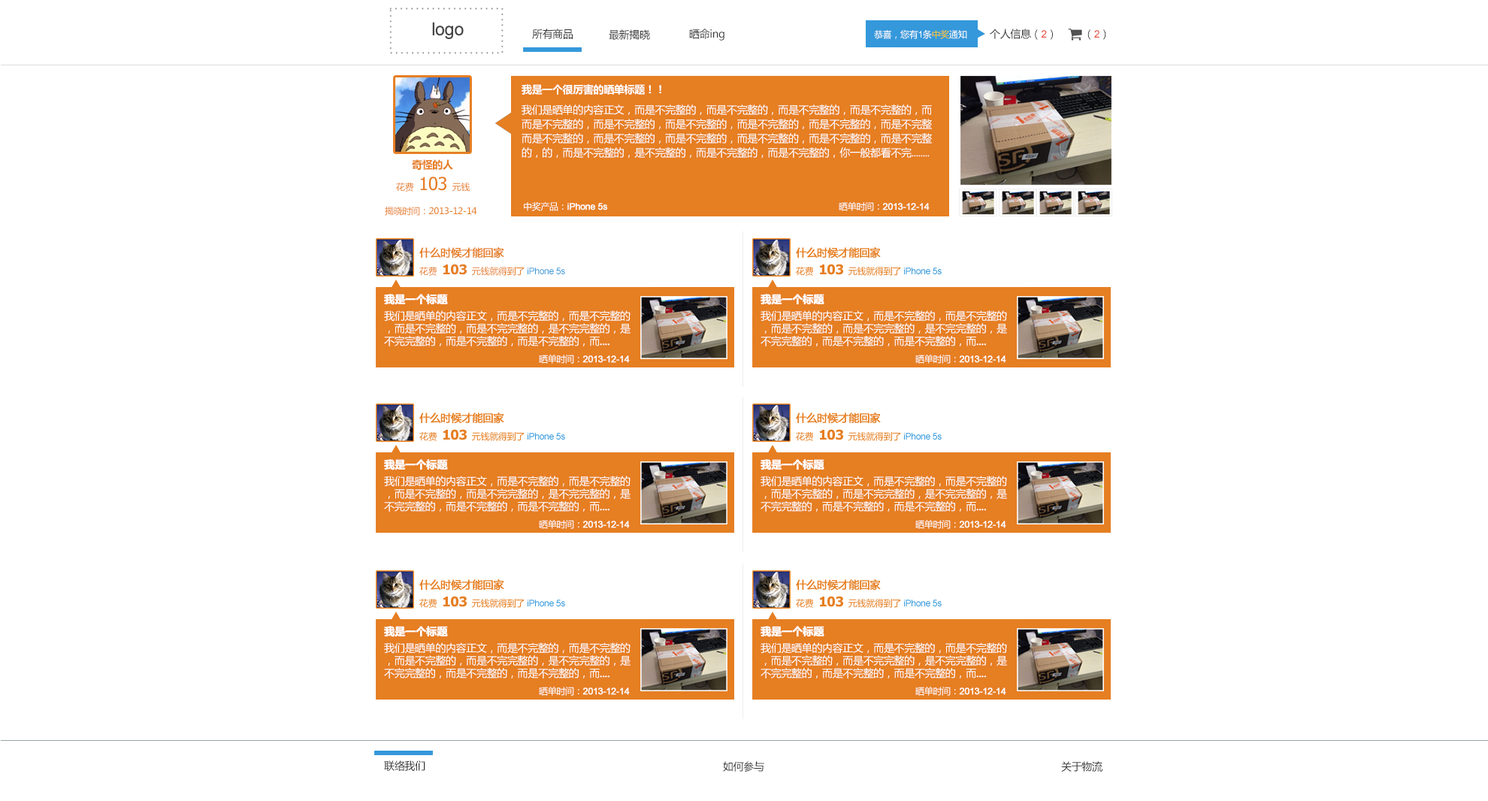
<style>
.page{position:relative;width:1488px;height:801px;background:#ffffff}
.page>*{position:absolute;margin:0}
.t1{font:10.5px "MicrosoftYaHei";letter-spacing:-0.025em;color:#333333}
.t2{font:10.5px "ArialMT";letter-spacing:-0.025em;color:#e74c3c}
.t3{font:9px "MicrosoftYaHei";letter-spacing:-0.025em;color:#ffffff}
.t4{font:9px "ArialMT";letter-spacing:-0.025em;color:#ffffff}
.t5{font:9px "MicrosoftYaHei";letter-spacing:-0.025em;color:#f1c619}
.t6{font:10.5px "MicrosoftYaHei-Bold";letter-spacing:-0.025em;color:#ffffff}
.t7{font:10.5px "MicrosoftYaHei";letter-spacing:-0.025em;color:#ffffff}
.t8{font:10.5px "MicrosoftYaHei-Bold";letter-spacing:-0.025em;color:#e67e22}
.t9{font:18px "Tahoma";letter-spacing:-0.025em;color:#e67e22}
.t10{font:9px "MicrosoftYaHei";letter-spacing:-0.025em;color:#e67e22}
.t11{font:9px "ArialMT";letter-spacing:-0.025em;color:#ffffff;font-weight:bold}
.t12{font:10.5px "MicrosoftYaHei";letter-spacing:-0.025em;color:#e67e22;font-weight:bold}
.t13{font:9px "ArialMT";letter-spacing:-0.025em;color:#3498db}
.t14{font:13.5px "Tahoma-Bold";letter-spacing:-0.025em;color:#e67e22}
.t15{font:10.5px "MicrosoftYaHei-Bold";letter-spacing:-0.025em;color:#ffffff;font-weight:bold}
.t16{font:10.5px "MicrosoftYaHei";letter-spacing:-0.025em;color:#ffffff;font-weight:bold}
</style>
<div class="page">
<p class="t1" style="left:532px;top:29px;width:41px;height:10px">所有商品</p>
<p class="t1" style="left:609px;top:29px;width:41px;height:11px">最新揭晓</p>
<p class="t1" style="left:689px;top:29px;width:36px;height:12px">晒命ing</p>
<p class="t1" style="left:990px;top:29px;width:63px;height:11px">个人信息（<span class="t2">2</span>）</p>
<p class="t1" style="left:1088px;top:29px;width:18px;height:11px">（<span class="t2">2</span>）</p>
<p class="t3" style="left:874px;top:30px;width:93px;height:9px">恭喜，您有<span class="t4">1</span>条<span class="t5">中奖</span>通知</p>
<p class="t6" style="left:522px;top:84px;width:139px;height:11px">我是一个很厉害的晒单标题！！</p>
<p class="t7" style="left:522px;top:104px;width:410px;height:54px">我们是晒单的内容正文，而是不完整的，而是不完整的，而是不完整的，而是不完整的，而<br>而是不完整的，而是不完整的，而是不完整的，而是不完整的，而是不完整的，而是不完整<br>而是不完整的，而是不完整的，而是不完整的，而是不完整的，而是不完整的，而是不完整<br>的，的，而是不完整的，是不完整的，而是不完整的，而是不完整的，你一般都看不完........</p>
<p class="t8" style="left:412px;top:159px;width:41px;height:11px">奇怪的人</p>
<p class="t9" style="left:396px;top:177px;width:75px;height:15px"><span class="t10">花费</span> 103 <span class="t10">元钱</span></p>
<p class="t10" style="left:385px;top:207px;width:92px;height:9px">揭晓时间：2013-12-14</p>
<p class="t11" style="left:524px;top:202px;width:83px;height:9px"><span class="t3">中奖产品：</span>iPhone 5s</p>
<p class="t11" style="left:839px;top:201px;width:91px;height:10px"><span class="t3">晒单时间：</span>2013-12-14</p>
<p class="t12" style="left:419px;top:247px;width:85px;height:12px">什么时候才能回家</p>
<p class="t13" style="left:419px;top:264px;width:146px;height:12px"><span class="t10">花费 </span><span class="t14">103 </span><span class="t10">元钱就得到了 </span>iPhone 5s</p>
<p class="t15" style="left:384px;top:294px;width:64px;height:11px">我是一个标题</p>
<p class="t7" style="left:384px;top:310px;width:247px;height:37px">我们是晒单的内容正文，而是不完整的，而是不完整的，而是不完整的，而是不完完整的，是不完完整的，是不完完整的，而是不完整的，而是不完整的，而<span class="t16">....</span></p>
<p class="t11" style="left:539px;top:354px;width:91px;height:10px"><span class="t3">晒单时间：</span>2013-12-14</p>
<p class="t1" style="left:384px;top:761px;width:41px;height:10px">联络我们</p>
<p class="t1" style="left:723px;top:761px;width:41px;height:11px">如何参与</p>
<p class="t1" style="left:1061px;top:761px;width:42px;height:11px">关于物流</p>
</div>
